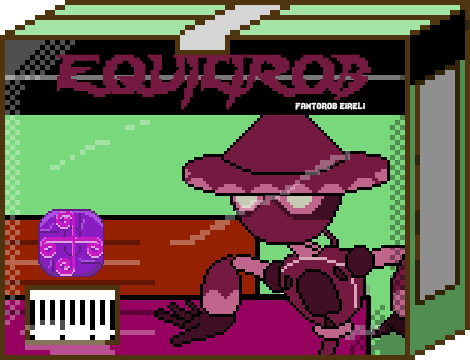
<style>
.page{position:relative;width:470px;height:360px}
.page>*{position:absolute;margin:0}
.t1{font:48.3px "Lady-Radical";color:#741a40;scale:0.93 1}
.t2{font:12px "Lady-Radical";color:#fbfbfb}
</style>
<div class="page">
<p class="t1" style="left:57px;top:54px;width:314px;height:56px">EQUILIROB</p>
<p class="t2" style="left:295px;top:102px;width:70px;height:8px">fantorob eireli</p>
</div>
